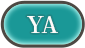
<style>
.page{position:relative;width:85px;height:48px;background:#1a9897}
.page>*{position:absolute;margin:0}
.t1{font:22px "RyuminPro-ExBold";letter-spacing:-0.08em;color:#fdfbf9}
</style>
<div class="page">
<p class="t1" style="left:27px;top:16px;width:31px;height:17px">YA</p>
</div>
